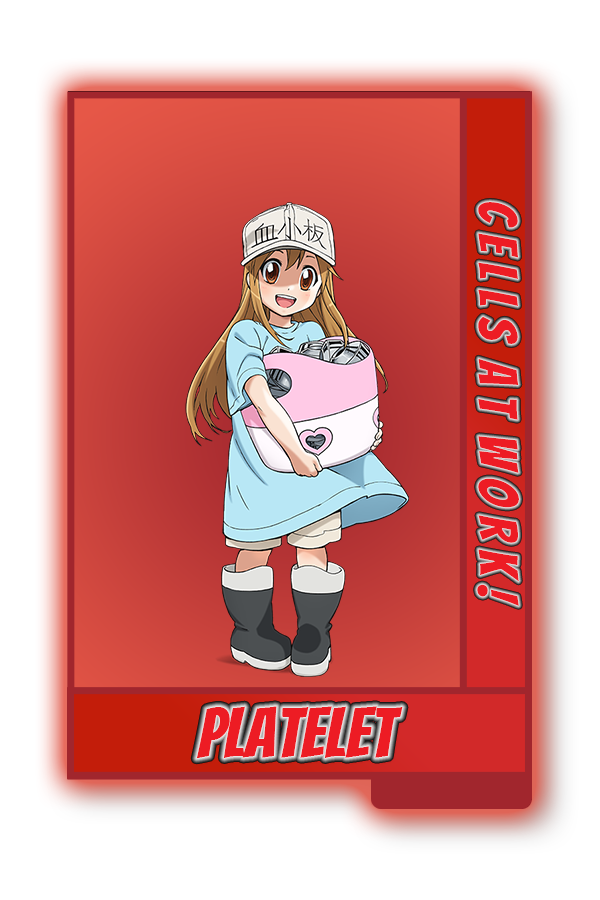
<style>
.page{position:relative;width:600px;height:900px;background:#ffffff}
.page>*{position:absolute;margin:0}
.t1{font:54px "Bangers-Regular";color:#ed1c24}
.t2{font:70px "Bangers-Regular";color:#ed1c24}
</style>
<div class="page">
<p class="t1" style="left:477px;top:202px;width:42px;height:404px;rotate:90deg">C e l l S  A t  W o r k !</p>
<p class="t2" style="left:196px;top:706px;width:207px;height:53px">Platelet</p>
</div>
